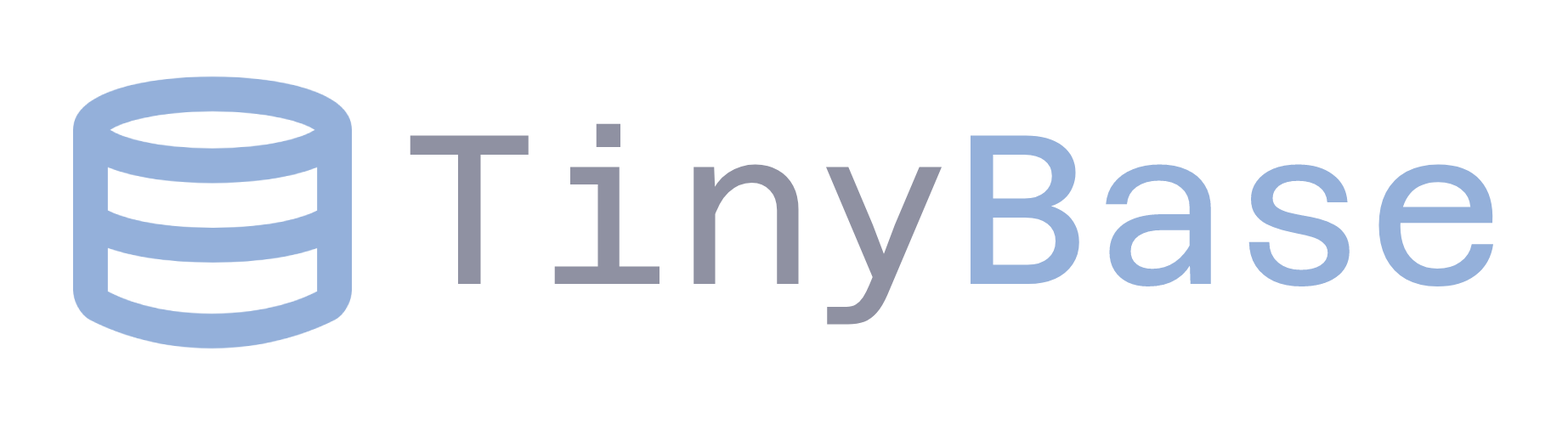
<style>
.page{position:relative;width:1568px;height:425px;background:#ffffff}
.page>*{position:absolute;margin:0}
.t1{font:212.5px "AzeretMono-Regular";color:#8f91a2}
.t2{font:212.5px "AzeretMono-Regular";color:#94b0da}
</style>
<div class="page">
<p class="t1" style="left:410px;top:123px;width:1084px;height:202px">Tiny<span class="t2">Base</span></p>
</div>
